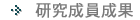
<style>
.page{position:relative;width:140px;height:20px;background:#ffffff}
.page>*{position:absolute;margin:0}
.t1{font:16px "DFHei-Md-HK-BF";color:#7a7a7a;font-weight:bold}
</style>
<div class="page">
<p class="t1" style="left:35px;top:3px;width:98px;height:15px">研究成員成果</p>
</div>
